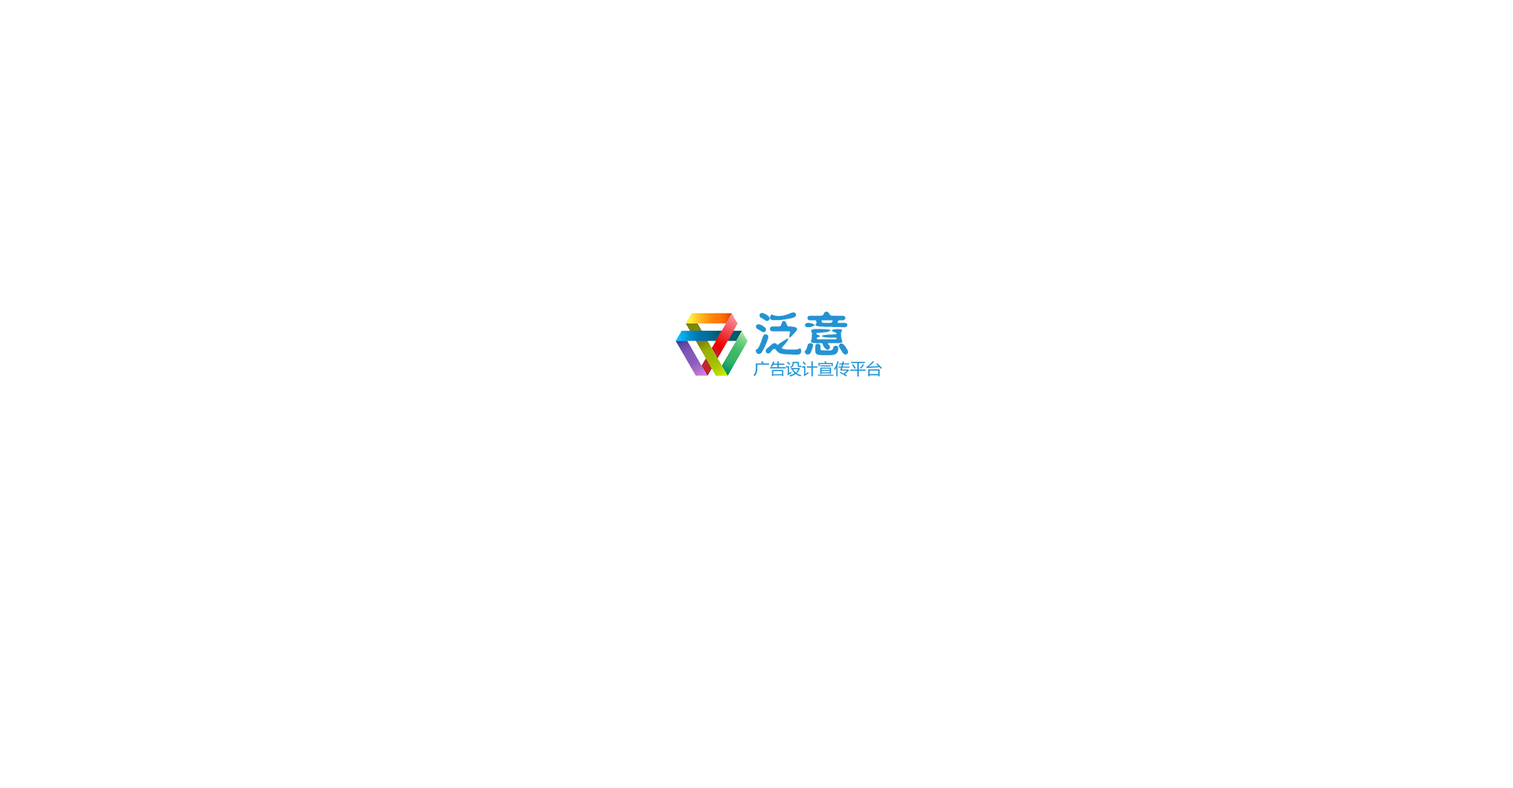
<style>
.page{position:relative;width:1513px;height:788px;background:#ffffff}
.page>*{position:absolute;margin:0}
.t1{font:47.3px "HYp1gj";color:#2493d3}
.t2{font:15.8px "MicrosoftYaHei";color:#2493d3}
</style>
<div class="page">
<p class="t1" style="left:756px;top:311px;width:93px;height:44px">泛意</p>
<p class="t2" style="left:753px;top:361px;width:130px;height:16px">广告设计宣传平台</p>
</div>
